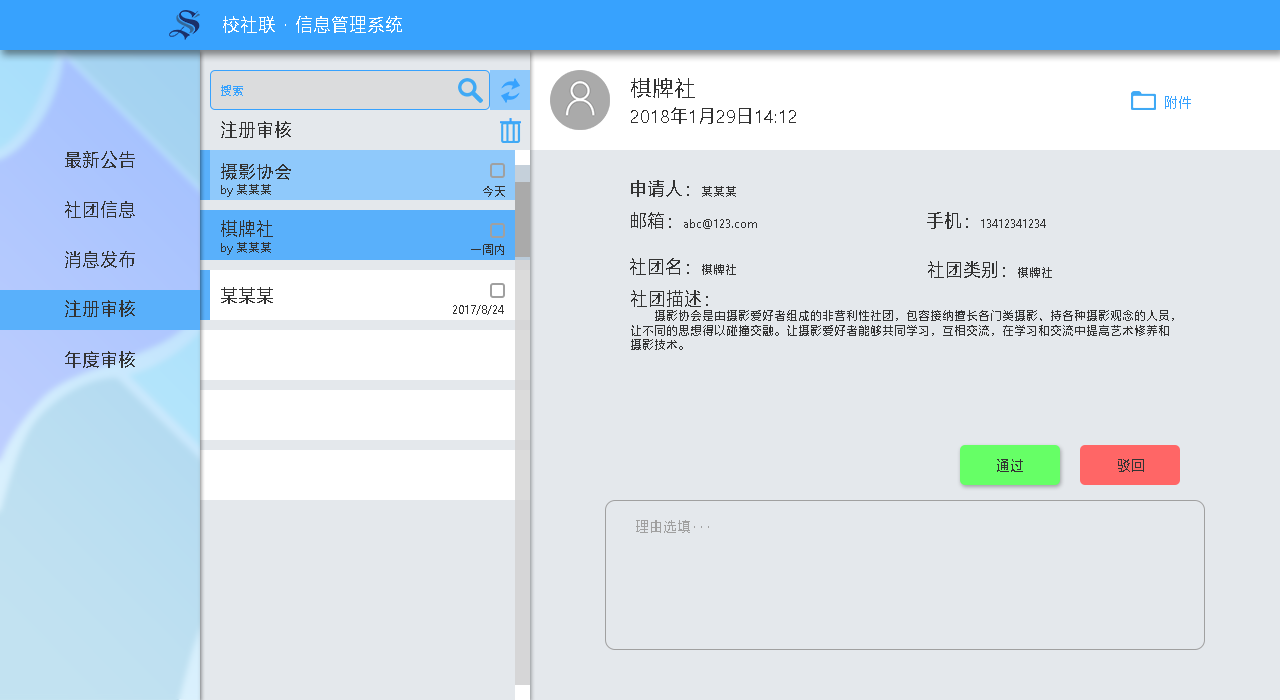
<style>
.page{position:relative;width:1280px;height:700px;background:#e4e8ec}
.page>*{position:absolute;margin:0}
.t1{font:18px "MicrosoftYaHei";color:#ffffff}
.t2{font:22px "MicrosoftYaHei";color:#333333}
.t3{font:12px "MicrosoftYaHei";color:#37a2fe}
.t4{font:14px "MicrosoftYaHei";color:#37a2fe}
.t5{font:18px "MicrosoftYaHei";color:#333333}
.t6{font:18px "SimHei";color:#333333}
.t7{font:12px "MicrosoftYaHei";color:#333333}
.t8{font:14px "MicrosoftYaHei";color:#333333}
.t9{font:14px "MicrosoftYaHei";color:#a0a0a0}
</style>
<div class="page">
<p class="t1" style="left:223px;top:16px;width:179px;height:17px">校社联 · 信息管理系统</p>
<p class="t2" style="left:631px;top:78px;width:64px;height:20px">棋牌社</p>
<p class="t3" style="left:221px;top:85px;width:22px;height:11px">搜索</p>
<p class="t4" style="left:1165px;top:96px;width:26px;height:13px">附件</p>
<p class="t5" style="left:631px;top:107px;width:165px;height:17px">2018年1月29日14:12</p>
<p class="t5" style="left:221px;top:121px;width:70px;height:17px">注册审核</p>
<p class="t5" style="left:65px;top:151px;width:70px;height:17px">最新公告</p>
<p class="t6" style="left:221px;top:163px;width:70px;height:17px">摄影协会</p>
<p class="t7" style="left:221px;top:184px;width:50px;height:13px">by 某某某</p>
<p class="t5" style="left:631px;top:180px;width:105px;height:17px">申请人：<span class="t7">某某某</span></p>
<p class="t7" style="left:483px;top:186px;width:22px;height:11px">今天</p>
<p class="t5" style="left:65px;top:201px;width:70px;height:17px">社团信息</p>
<p class="t5" style="left:221px;top:220px;width:52px;height:17px">棋牌社</p>
<p class="t7" style="left:631px;top:212px;width:126px;height:17px"><span class="t5">邮箱：</span>abc@123.com</p>
<p class="t7" style="left:927px;top:212px;width:119px;height:17px"><span class="t5">手机：</span>13412341234</p>
<p class="t7" style="left:221px;top:242px;width:50px;height:13px">by 某某某</p>
<p class="t7" style="left:471px;top:244px;width:33px;height:11px">一周内</p>
<p class="t5" style="left:65px;top:251px;width:70px;height:17px">消息发布</p>
<p class="t5" style="left:630px;top:258px;width:106px;height:17px">社团名：<span class="t7">棋牌社</span></p>
<p class="t5" style="left:928px;top:261px;width:124px;height:17px">社团类别：<span class="t7">棋牌社</span></p>
<p class="t5" style="left:221px;top:287px;width:52px;height:17px">某某某</p>
<p class="t7" style="left:631px;top:290px;width:543px;height:60px"><span class="t5">社团描述：</span><br>        摄影协会是由摄影爱好者组成的非营利性社团，包容接纳擅长各门类摄影、持各种摄影观念的人员，<br>让不同的思想得以碰撞交融。让摄影爱好者能够共同学习，互相交流，在学习和交流中提高艺术修养和<br>摄影技术。</p>
<p class="t5" style="left:65px;top:300px;width:70px;height:17px">注册审核</p>
<p class="t7" style="left:453px;top:305px;width:51px;height:10px">2017/8/24</p>
<p class="t5" style="left:65px;top:351px;width:70px;height:17px">年度审核</p>
<p class="t8" style="left:997px;top:459px;width:26px;height:13px">通过</p>
<p class="t8" style="left:1118px;top:459px;width:26px;height:13px">驳回</p>
<p class="t9" style="left:636px;top:520px;width:73px;height:13px">理由选填···</p>
</div>
